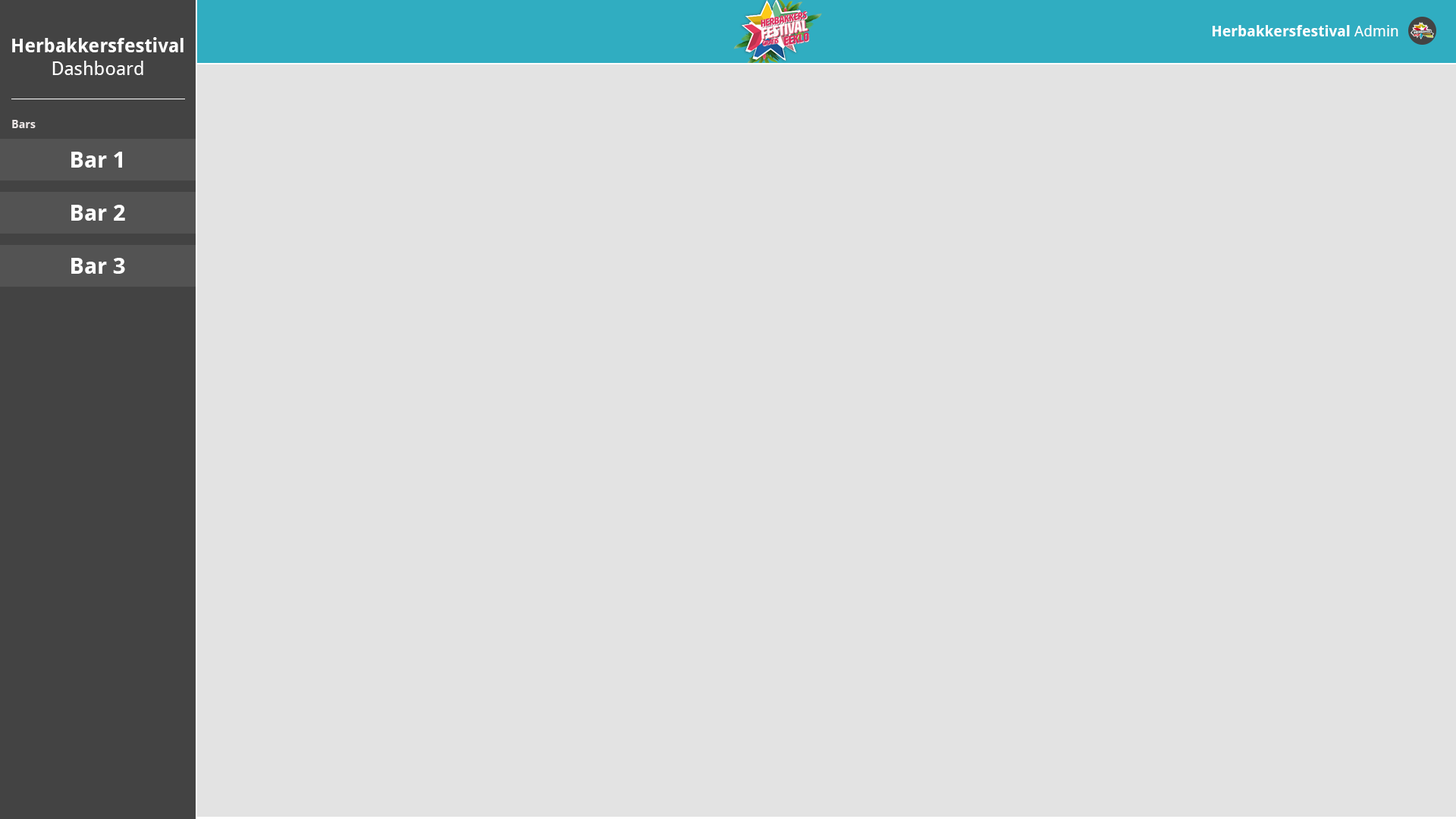
<style>
.page{position:relative;width:1456px;height:819px;background:#e3e3e3}
.page>*{position:absolute;margin:0}
.t1{font:15.2px "DroidSans-Bold";color:#ffffff}
.t2{font:15.2px "DroidSans";color:#ffffff}
.t3{font:19px "DroidSans-Bold";color:#ffffff}
.t4{font:19px "DroidSans";color:#ffffff}
.t5{font:11.4px "DroidSans-Bold";color:#ebe5e5}
.t6{font:22.7px "DroidSans-Bold";color:#ffffff}
</style>
<div class="page">
<p class="t1" style="left:1213px;top:25px;width:185px;height:11px">Herbakkersfestival<span class="t2"> Admin</span></p>
<p class="t3" style="left:12px;top:37px;width:172px;height:38px;text-align:center">Herbakkersfestival<br><span class="t4">Dashboard</span></p>
<p class="t5" style="left:12px;top:120px;width:24px;height:8px">Bars</p>
<p class="t6" style="left:71px;top:152px;width:51px;height:16px">Bar 1</p>
<p class="t6" style="left:71px;top:205px;width:54px;height:16px">Bar 2</p>
<p class="t6" style="left:71px;top:258px;width:54px;height:16px">Bar 3</p>
</div>
